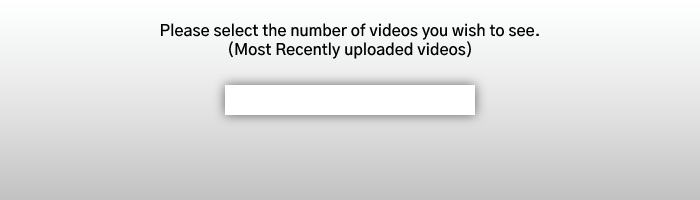
<style>
.page{position:relative;width:700px;height:200px}
.page>*{position:absolute;margin:0}
.t1{font:15.8px "GothicA1-SemiBold";color:#000000}
</style>
<div class="page">
<p class="t1" style="left:161px;top:23px;width:378px;height:36px;text-align:center">Please select the number of videos you wish to see.<br>(Most Recently uploaded videos)</p>
</div>
